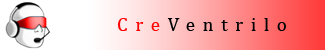
<style>
.page{position:relative;width:325px;height:50px}
.page>*{position:absolute;margin:0}
.t1{font:19.2px "Cambria";letter-spacing:0.4em;color:#000000}
.t2{font:19.2px "Cambria";letter-spacing:0.4em;color:#ff0000}
</style>
<div class="page">
<p class="t1" style="left:117px;top:18px;width:169px;height:13px"><span class="t2">Cre</span>Ventrilo</p>
</div>
